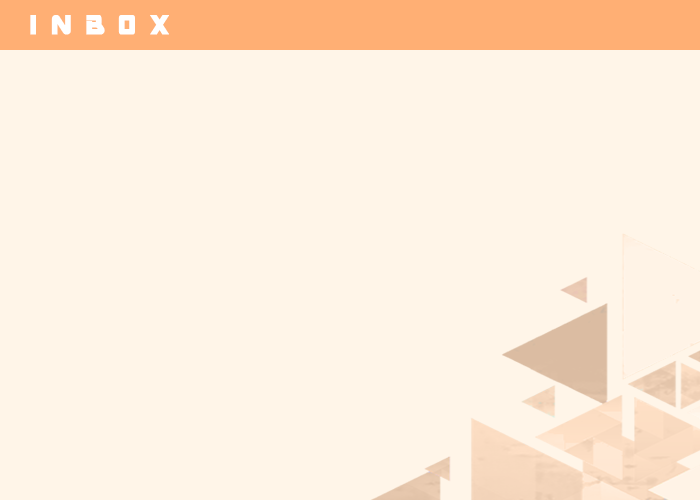
<style>
.page{position:relative;width:700px;height:500px;background:#fff5e8}
.page>*{position:absolute;margin:0}
.t1{font:30px "ARDESTINE";letter-spacing:-0.07em;color:#ffffff;font-weight:bold}
</style>
<div class="page">
<p class="t1" style="left:30px;top:15px;width:139px;height:20px">I N B O X</p>
</div>
